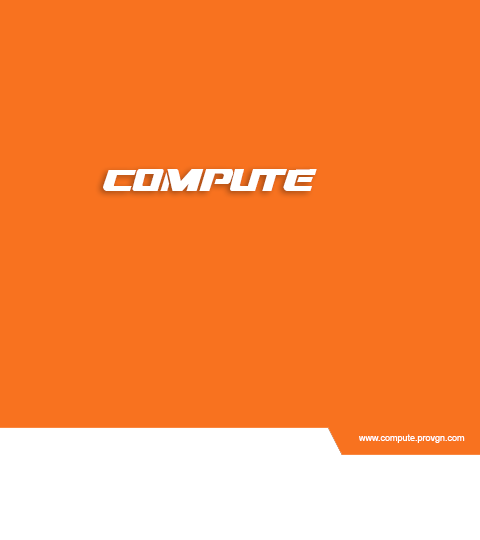
<style>
.page{position:relative;width:480px;height:540px;background:#f8721f}
.page>*{position:absolute;margin:0}
.t1{font:31px "DreamMMA";color:#ffffff}
.t2{font:9px "ArialMT";color:#ffffff}
</style>
<div class="page">
<p class="t1" style="left:103px;top:169px;width:214px;height:22px">compute</p>
<p class="t2" style="left:359px;top:434px;width:106px;height:9px">www.compute.provgn.com</p>
</div>
